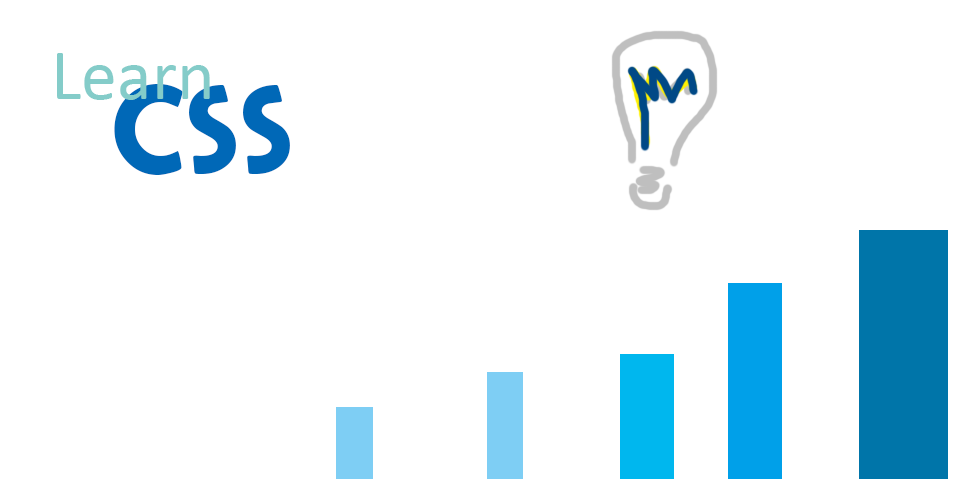
<style>
.page{position:relative;width:960px;height:500px;background:#ffffff}
.page>*{position:absolute;margin:0}
.t1{font:72px "Calibri";color:#84ccc9}
.t2{font:183px "BerlinSansFB-Reg";color:#0068b7}
</style>
<div class="page">
<p class="t1" style="left:57px;top:53px;width:153px;height:47px">Learn</p>
<p class="t2" style="left:114px;top:84px;width:176px;height:91px">css</p>
</div>
